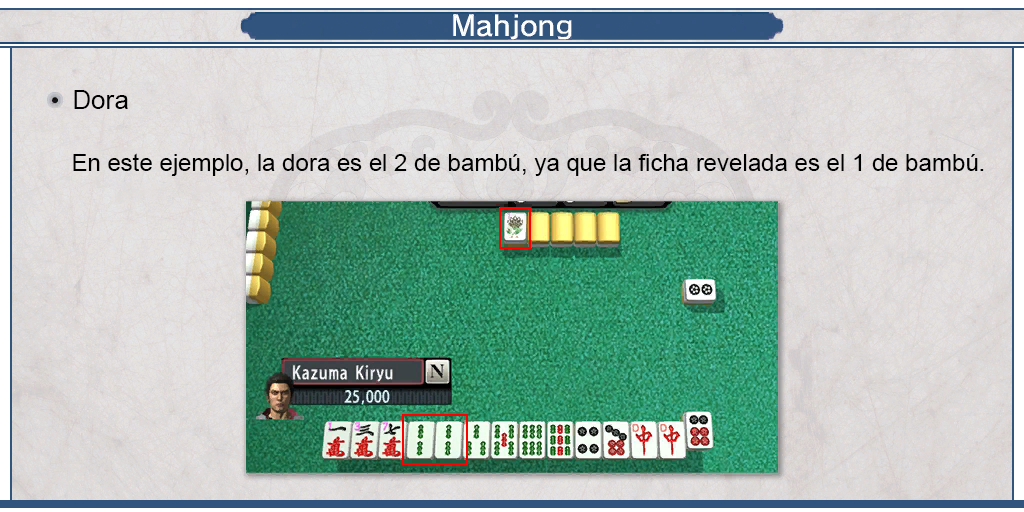
<style>
.page{position:relative;width:1024px;height:512px}
.page>*{position:absolute;margin:0}
.t1{font:26px "ArialMT";color:#000000}
.t2{font:24px "ArialMT";color:#000000}
</style>
<div class="page">
<p class="t1" style="left:74px;top:90px;width:54px;height:19px">Dora</p>
<p class="t2" style="left:73px;top:153px;width:911px;height:23px">En este ejemplo, la dora es el 2 de bambú, ya que la ficha revelada es el 1 de bambú.</p>
</div>
